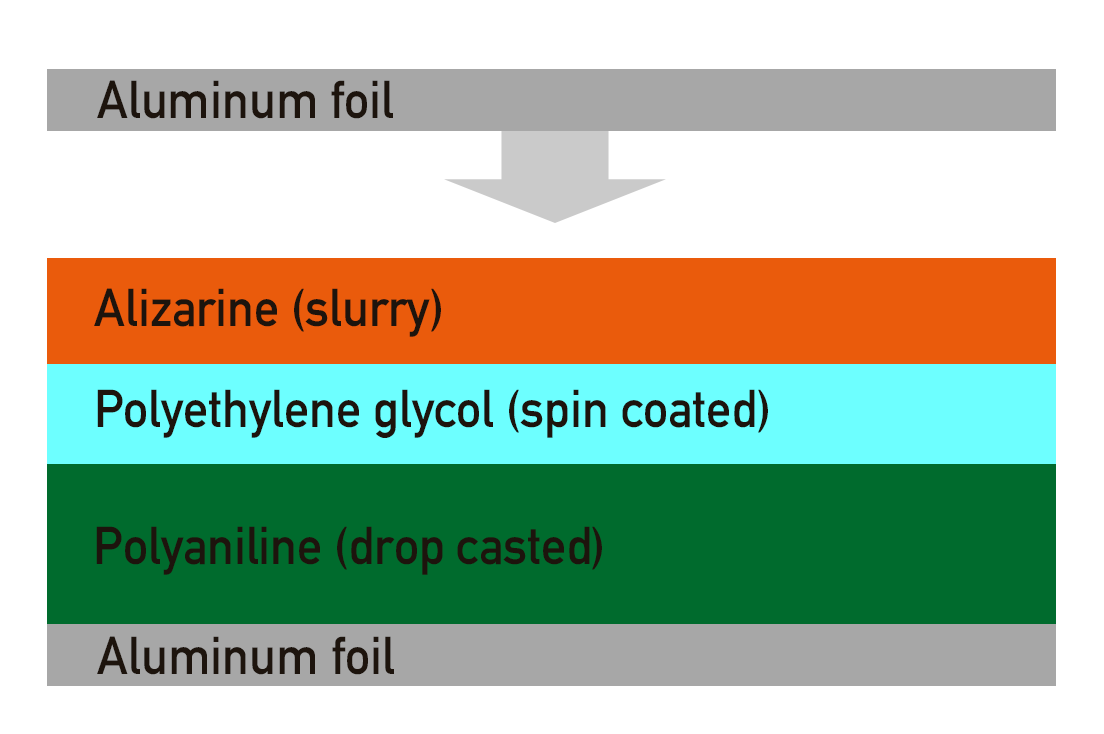
<style>
.page{position:relative;width:1104px;height:734px;background:#ffffff}
.page>*{position:absolute;margin:0}
.t1{font:52.5px "DIN-1451-Mittelschrift-Regular";color:#1d140d;scale:0.95 1}
</style>
<div class="page">
<p class="t1" style="left:97px;top:80px;width:296px;height:39px">Aluminum foil</p>
<p class="t1" style="left:94px;top:288px;width:347px;height:49px">Alizarine (slurry)</p>
<p class="t1" style="left:97px;top:389px;width:671px;height:49px">Polyethylene glycol (spin coated)</p>
<p class="t1" style="left:96px;top:526px;width:506px;height:49px">Polyaniline (drop casted)</p>
<p class="t1" style="left:97px;top:636px;width:297px;height:39px">Aluminum foil</p>
</div>
